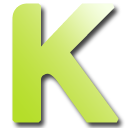
<style>
.page{position:relative;width:128px;height:128px;background:#ffffff}
.page>*{position:absolute;margin:0}
.t1{font:170px "Harabara";font-weight:bold}
</style>
<div class="page">
<p class="t1" style="left:12px;top:3px;width:107px;height:120px">K</p>
</div>
